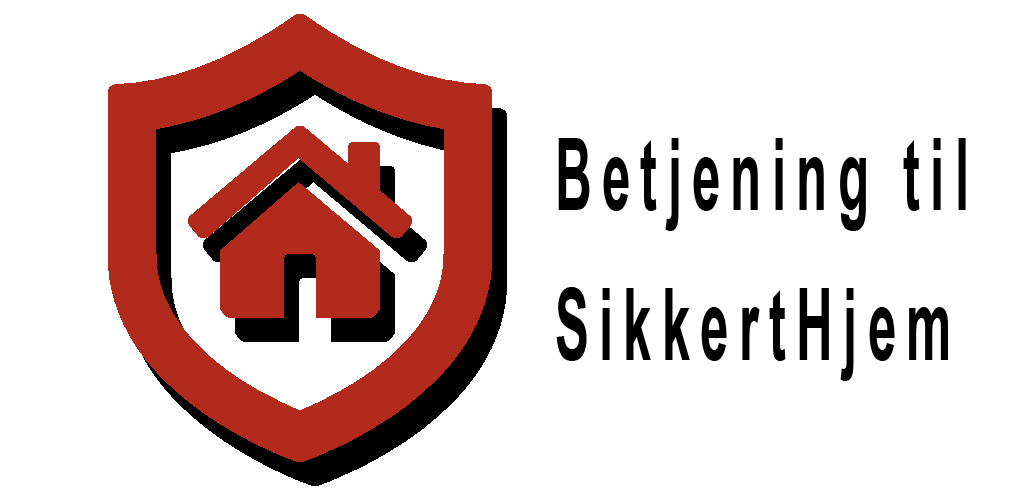
<style>
.page{position:relative;width:1024px;height:500px;background:#ffffff}
.page>*{position:absolute;margin:0}
.t1{font:100px/150px "Arial-BoldMT";letter-spacing:0.2em;color:#000000;scale:0.51 1}
</style>
<div class="page">
<p class="t1" style="left:556px;top:138px;width:410px;height:243px">Betjening til <br>SikkertHjem</p>
</div>
